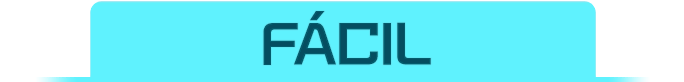
<style>
.page{position:relative;width:684px;height:82px;background:#5ff2fe}
.page>*{position:absolute;margin:0}
.t1{font:48px "KafuTechnoStd-HV";letter-spacing:0.01em;color:#054d60}
</style>
<div class="page">
<p class="t1" style="left:263px;top:11px;width:168px;height:54px">FÁCIL</p>
</div>
